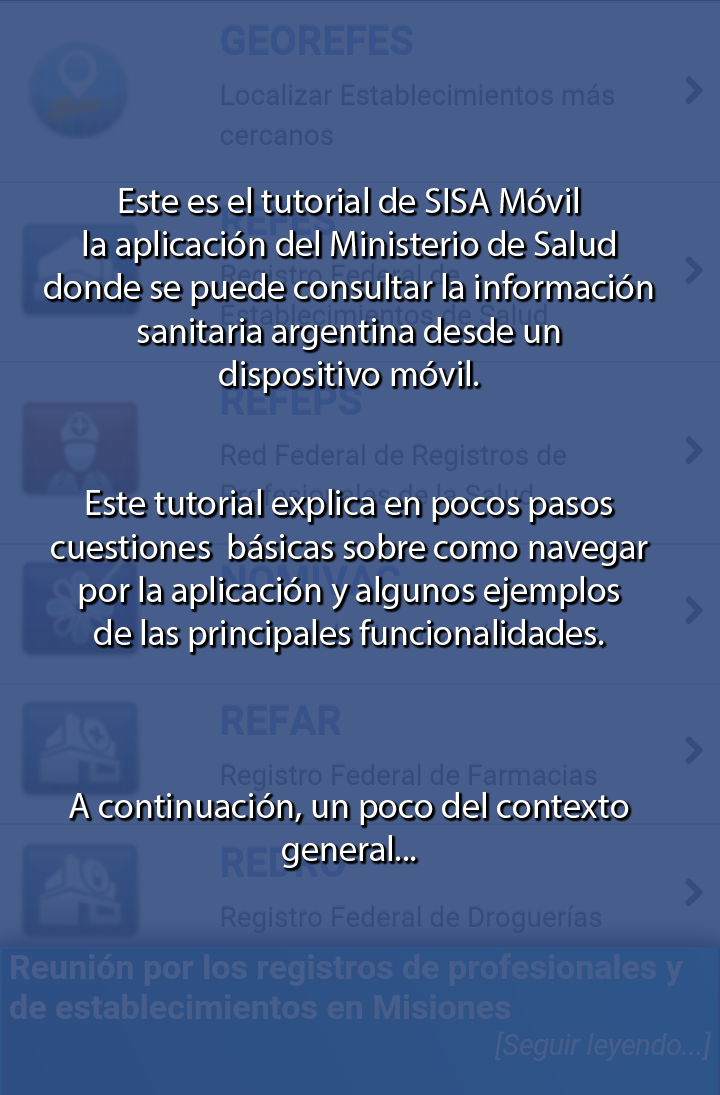
<style>
.page{position:relative;width:720px;height:1095px;background:#475e8c}
.page>*{position:absolute;margin:0}
.t1{font:36px "MyriadPro-Regular";color:#ffffff}
</style>
<div class="page">
<p class="t1" style="left:44px;top:187px;width:609px;height:681px;text-align:center">Este es el tutorial de SISA Móvil<br>la aplicación del Ministerio de Salud<br>donde se puede consultar la información<br>sanitaria argentina desde un<br>dispositivo móvil.<br><br><br>Este tutorial explica en pocos pasos<br>cuestiones  básicas sobre como navegar<br>por la aplicación y algunos ejemplos<br>de las principales funcionalidades.<br><br><br><br>A continuación, un poco del contexto<br>general...</p>
</div>
